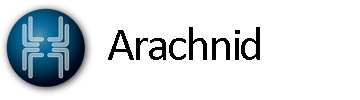
<style>
.page{position:relative;width:360px;height:100px;background:#ffffff}
.page>*{position:absolute;margin:0}
.t1{font:48px "Calibri";letter-spacing:-0.05em;color:#000000}
</style>
<div class="page">
<p class="t1" style="left:108px;top:27px;width:152px;height:33px">Arachnid</p>
</div>
